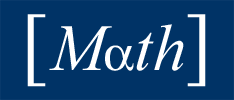
<style>
.page{position:relative;width:234px;height:100px;background:#003366}
.page>*{position:absolute;margin:0}
.t1{font:65.8px "TimesNewRomanPS-ItalicMT";color:#ffffff}
.t2{font:82.2px "TimesNewRomanPSMT";color:#ffffff}
.t3{font:49.3px "Symbol";color:#ffffff}
</style>
<div class="page">
<p class="t1" style="left:27px;top:14px;width:179px;height:73px"><span class="t2">[</span>M<span class="t3">a</span>th<span class="t2">]</span></p>
</div>
